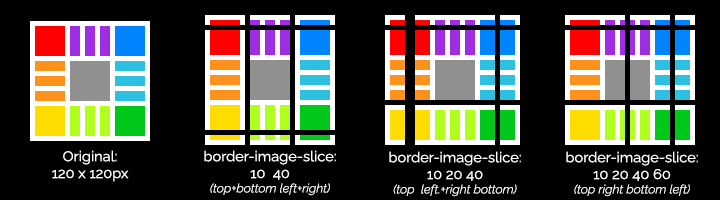
<style>
.page{position:relative;width:720px;height:200px;background:#000000}
.page>*{position:absolute;margin:0}
.t1{font:14px "Raleway-Regular";color:#ffffff;scale:1.05 1}
.t2{font:12px "Raleway-LightItalic";color:#ffffff;scale:1.05 1}
</style>
<div class="page">
<p class="t1" style="left:52px;top:150px;width:77px;height:32px;text-align:center">Original:<br>120 x 120px</p>
<p class="t1" style="left:204px;top:150px;width:132px;height:46px;text-align:center">border-image-slice: <br>10  40<br><span class="t2">(top+bottom left+right)</span></p>
<p class="t1" style="left:389px;top:151px;width:132px;height:46px;text-align:center">border-image-slice: <br>10 20 40<br><span class="t2">(top  left.+right bottom)</span></p>
<p class="t1" style="left:566px;top:151px;width:132px;height:46px;text-align:center">border-image-slice: <br>10 20 40 60<br><span class="t2">(top right bottom left)</span></p>
</div>
